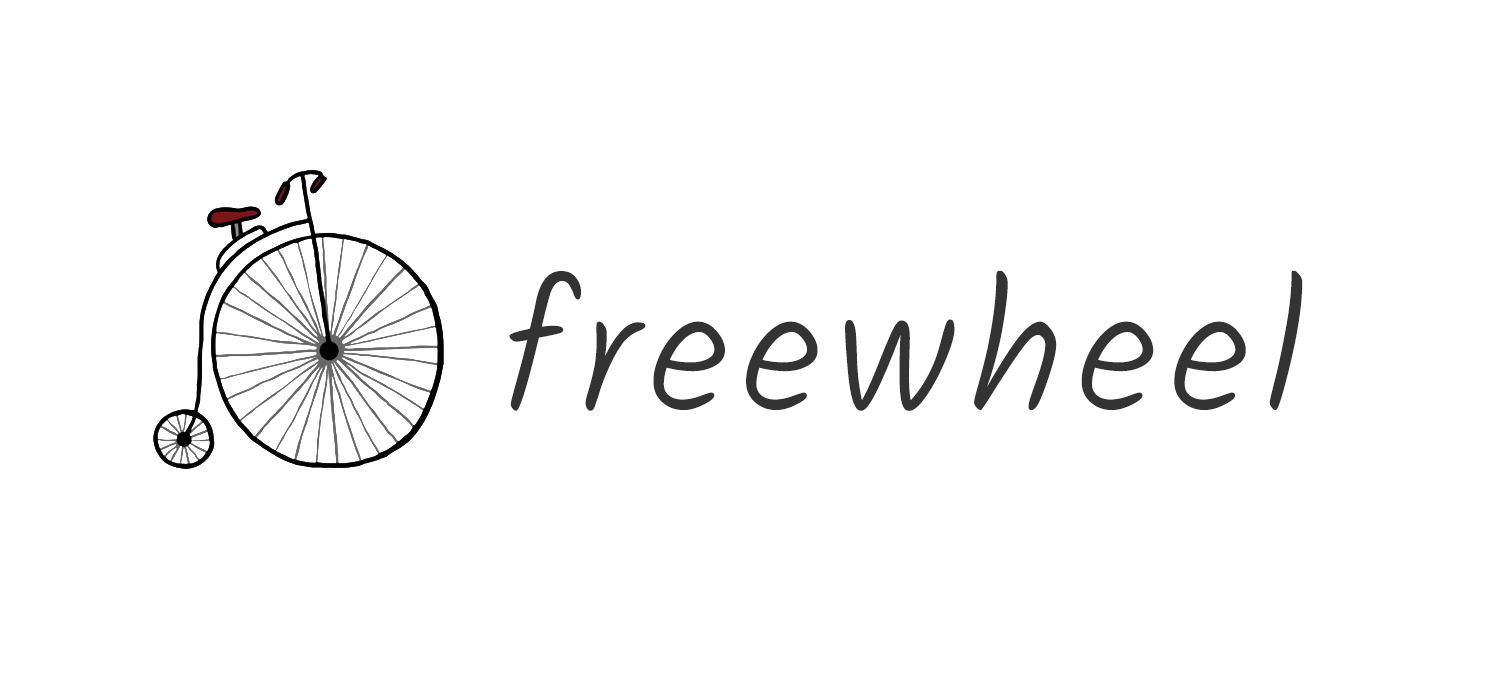
<style>
.page{position:relative;width:1494px;height:675px;background:#ffffff}
.page>*{position:absolute;margin:0}
.t1{font:182px "Kalam-Light";letter-spacing:0.08em;color:#333333}
</style>
<div class="page">
<p class="t1" style="left:509px;top:270px;width:794px;height:141px">freewheel</p>
</div>
